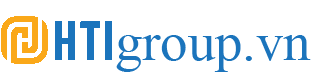
<style>
.page{position:relative;width:314px;height:83px;background:#ffffff}
.page>*{position:absolute;margin:0}
.t1{font:54.7px "TimesNewRomanPSMT";color:#1b74bc}
</style>
<div class="page">
<p class="t1" style="left:116px;top:35px;width:195px;height:37px">group.vn</p>
</div>
